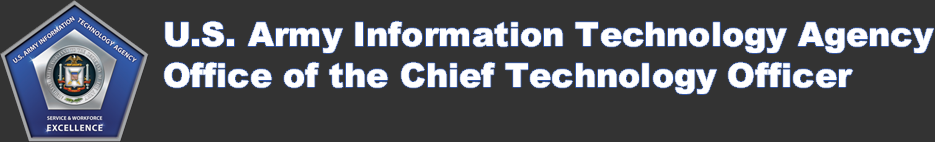
<style>
.page{position:relative;width:935px;height:142px;background:#333333}
.page>*{position:absolute;margin:0}
.t1{font:33.3px/41.7px "Arial-Black";color:#ffffff}
</style>
<div class="page">
<p class="t1" style="left:164px;top:21px;width:770px;height:73px">U.S. Army Information Technology Agency<br>Office of the Chief Technology Officer</p>
</div>
